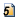
<style>
.page{position:relative;width:21px;height:20px;background:#ffffff}
.page>*{position:absolute;margin:0}
.t1{font:12px "ArialNarrow";color:#000000;font-weight:bold;font-style:italic}
</style>
<div class="page">
<p class="t1" style="left:3px;top:6px;width:7px;height:10px">5</p>
</div>
